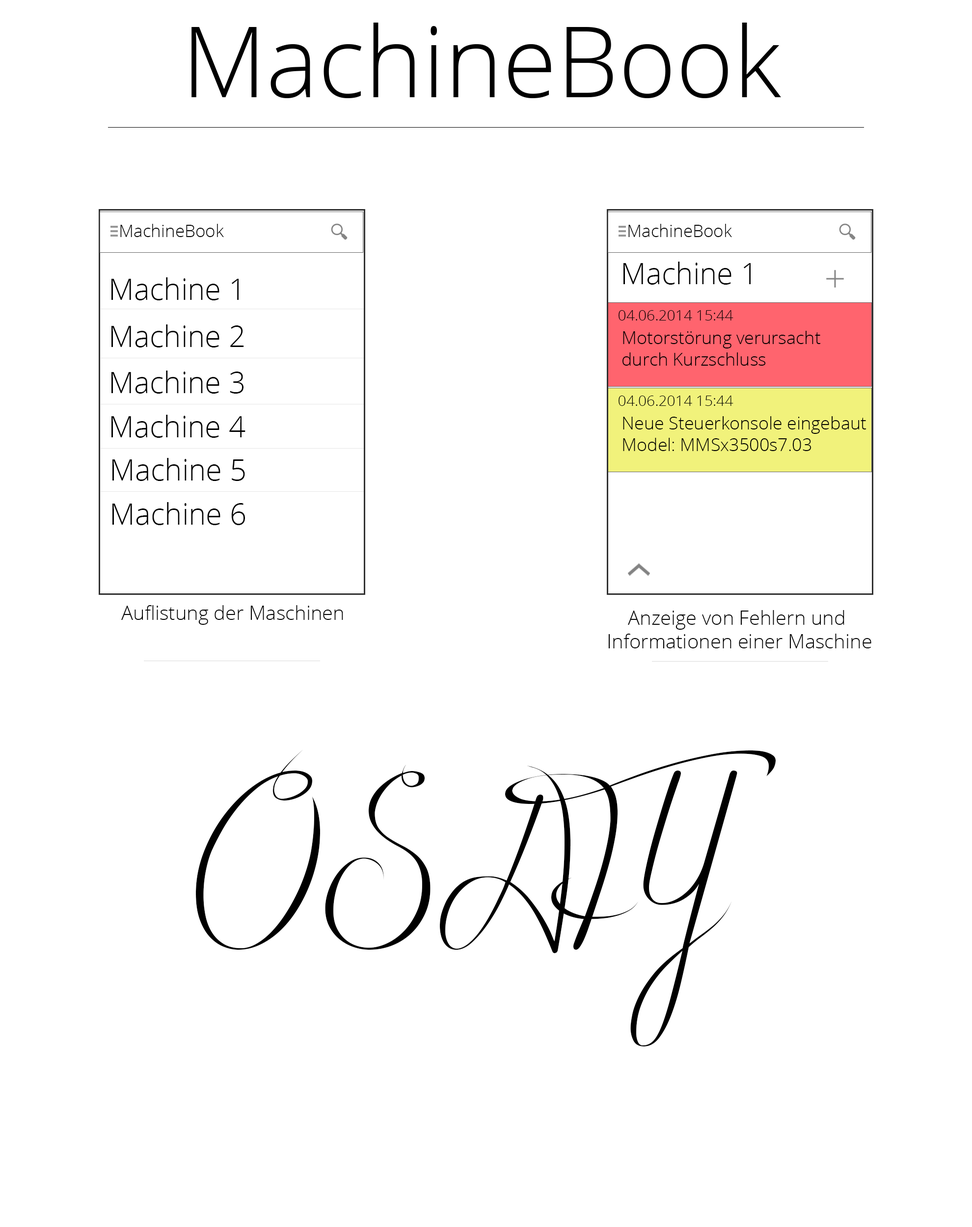
<style>
.page{position:relative;width:972px;height:1227px;background:#ffffff}
.page>*{position:absolute;margin:0}
.t1{font:17.2px "OpenSans-Light";color:#000000}
.t2{font:29.4px "OpenSans-Light";color:#000000}
.t3{font:14.7px "OpenSans-Light";color:#000000}
.t4{font:17.7px "OpenSans-Light";color:#000000}
.t5{font:19.6px "OpenSans-Light";color:#000000}
.t6{font:245.4px "BlackOlives";color:#000000}
</style>
<div class="page">
<p class="t1" style="left:120px;top:224px;width:104px;height:13px">MachineBook</p>
<p class="t1" style="left:628px;top:224px;width:104px;height:13px">MachineBook</p>
<p class="t2" style="left:623px;top:262px;width:127px;height:23px">Machine 1</p>
<p class="t2" style="left:111px;top:277px;width:128px;height:23px">Machine 1</p>
<p class="t3" style="left:618px;top:310px;width:115px;height:10px">04.06.2014 15:44</p>
<p class="t2" style="left:111px;top:324px;width:133px;height:23px">Machine 2</p>
<p class="t4" style="left:622px;top:331px;width:199px;height:35px">Motorstörung verursacht durch Kurzschluss</p>
<p class="t2" style="left:111px;top:371px;width:132px;height:23px">Machine 3</p>
<p class="t3" style="left:618px;top:396px;width:115px;height:10px">04.06.2014 15:44</p>
<p class="t2" style="left:111px;top:415px;width:134px;height:23px">Machine 4</p>
<p class="t4" style="left:623px;top:416px;width:243px;height:35px">Neue Steuerkonsole eingebaut<br>Model: MMSx3500s7.03</p>
<p class="t2" style="left:112px;top:458px;width:133px;height:23px">Machine 5</p>
<p class="t2" style="left:112px;top:502px;width:133px;height:23px">Machine 6</p>
<p class="t5" style="left:121px;top:605px;width:222px;height:20px">Auflistung der Maschinen</p>
<p class="t5" style="left:608px;top:610px;width:263px;height:38px;text-align:center">Anzeige von Fehlern und <br>Informationen einer Maschine</p>
<p class="t6" style="left:196px;top:750px;width:579px;height:296px">OSAFY</p>
</div>
